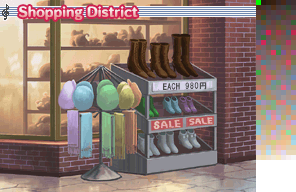
<style>
.page{position:relative;width:296px;height:192px}
.page>*{position:absolute;margin:0}
.t1{font:12px "HummingStd-E";letter-spacing:0.02em}
.t2{font:8px "MS-Gothic";letter-spacing:0.05em;color:#484848;scale:1.05 1}
.t3{font:8px "MS-Gothic";color:#484848;scale:1.05 1}
</style>
<div class="page">
<p class="t1" style="left:19px;top:6px;width:119px;height:14px">Shopping District</p>
<p class="t2" style="left:163px;top:82px;width:44px;height:8px;opacity:0.97"><span class="t3">EA</span>CH 980円</p>
</div>
